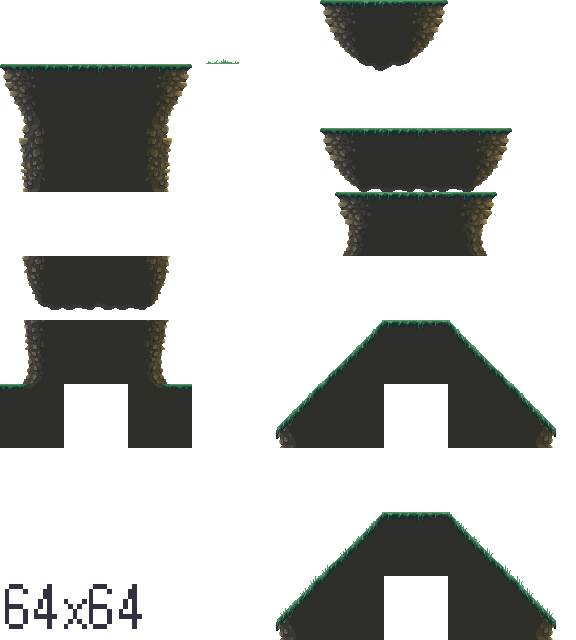
<style>
.page{position:relative;width:576px;height:640px;background:#ffffff}
.page>*{position:absolute;margin:0}
.t1{font:56.7px "Small Fonts";letter-spacing:0.1em;color:#333040;scale:0.92 1}
</style>
<div class="page">
<p class="t1" style="left:5px;top:584px;width:137px;height:45px">64x64</p>
</div>
